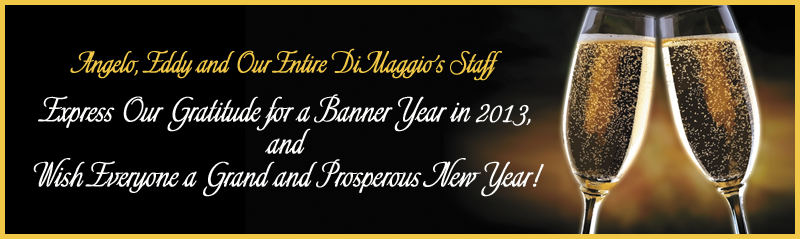
<style>
.page{position:relative;width:800px;height:239px;background:#000000}
.page>*{position:absolute;margin:0}
.t1{font:30px/32.4px "Toots-Regular";color:#fdfdfc;font-weight:bold;scale:0.95 1}
.t2{font:25.9px/37.8px "Toots-Regular";color:#f0c746;font-weight:bold;scale:0.95 1}
.t3{font:30px/48.6px "Toots-Regular";color:#fdfdfc;font-weight:bold;scale:0.95 1}
.t4{font:30px/37.8px "Toots-Regular";color:#fdfdfc;font-weight:bold;scale:0.95 1}
</style>
<div class="page">
<p class="t1" style="left:33px;top:48px;width:511px;height:149px;text-align:center"><span class="t2">Angelo, Eddy and Our Entire DiMaggio’s Staff <br></span><span class="t3">Express Our Gratitude for a Banner Year in 2013</span><span class="t4">,<br></span> and <br>Wish Everyone a Grand and Prosperous New Year!</p>
</div>
